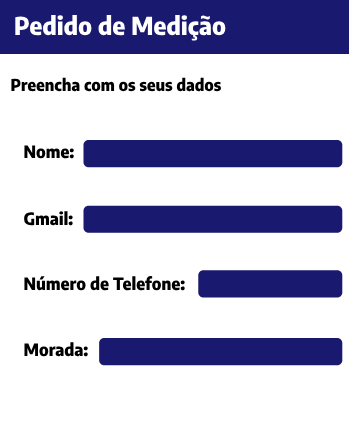
<style>
.page{position:relative;width:349px;height:436px;background:#ffffff}
.page>*{position:absolute;margin:0}
.t1{font:24.6px "EncodeSansSemiCondensed-ExtraBold";color:#ffffff}
.t2{font:16.4px "EncodeSansSemiCondensed-ExtraBold";color:#000000}
.t3{font:17px "EncodeSansSemiCondensed-ExtraBold";color:#000000}
</style>
<div class="page">
<p class="t1" style="left:15px;top:15px;width:211px;height:26px">Pedido de Medição</p>
<p class="t2" style="left:11px;top:77px;width:210px;height:15px">Preencha com os seus dados</p>
<p class="t3" style="left:24px;top:145px;width:50px;height:14px">Nome:</p>
<p class="t3" style="left:24px;top:211px;width:49px;height:15px">Gmail:</p>
<p class="t3" style="left:24px;top:276px;width:161px;height:15px">Número de Telefone:</p>
<p class="t3" style="left:24px;top:342px;width:64px;height:15px">Morada:</p>
</div>
